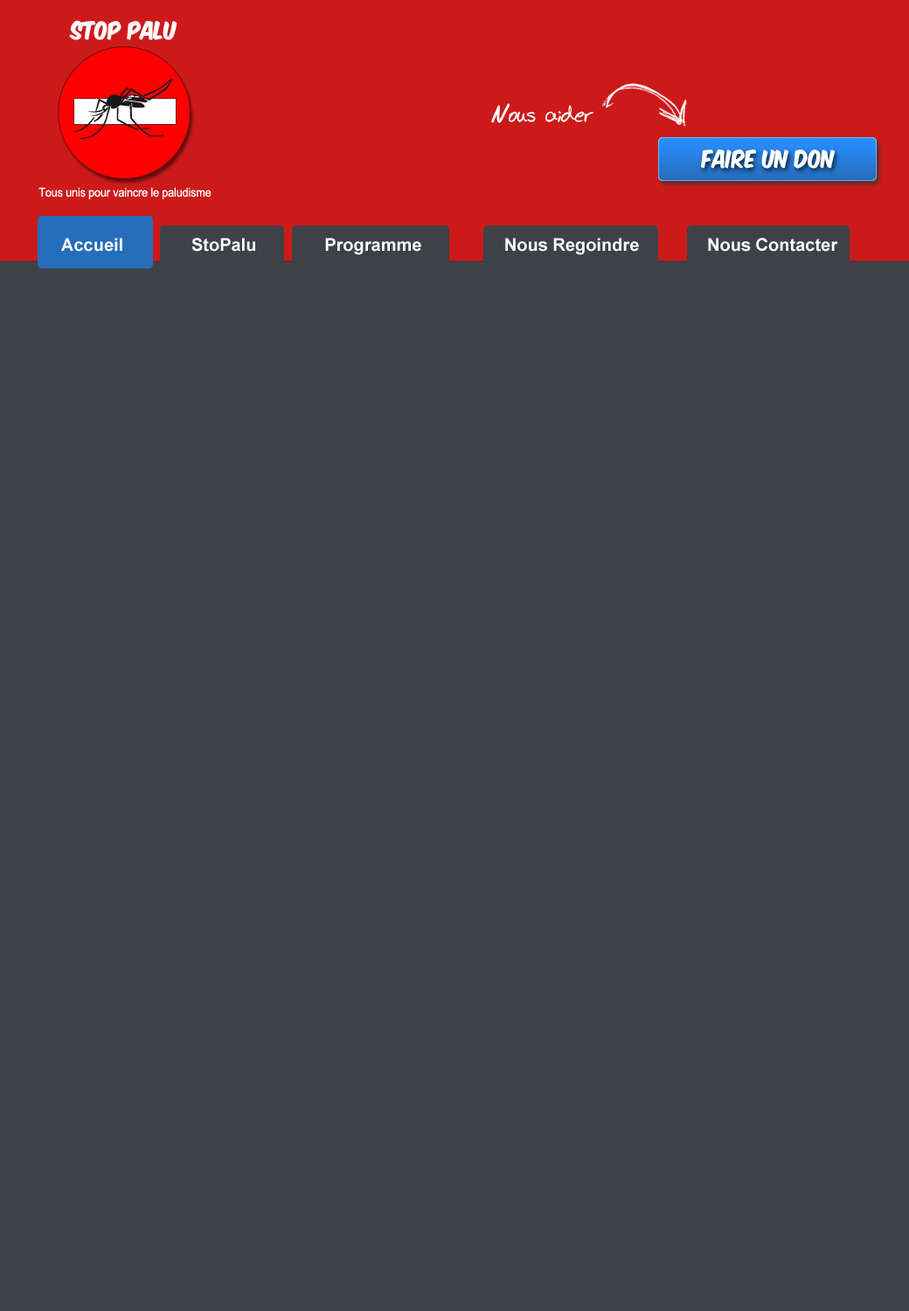
<style>
.page{position:relative;width:909px;height:1311px;background:#3e4247}
.page>*{position:absolute;margin:0}
.t1{font:21px "KomikaAxis";letter-spacing:-0.01em;color:#ffffff;scale:0.9 1}
.t2{font:21px "BudHand-Bold";color:#ffffff}
.t3{font:12.2px "ArialMT";letter-spacing:-0.01em;color:#ffffff;scale:0.9 1}
.t4{font:17.5px "Arial-BoldMT";color:#fefefe}
</style>
<div class="page">
<p class="t1" style="left:69px;top:20px;width:108px;height:20px">STOP PALU</p>
<p class="t2" style="left:491px;top:103px;width:103px;height:20px">Nous aider</p>
<p class="t1" style="left:701px;top:150px;width:134px;height:19px">Faire un don</p>
<p class="t3" style="left:38px;top:187px;width:174px;height:12px">Tous unis pour vaincre le paludisme</p>
<p class="t4" style="left:61px;top:238px;width:777px;height:17px">Accueil              StoPalu              Programme                 Nous Regoindre              Nous Contacter</p>
</div>
